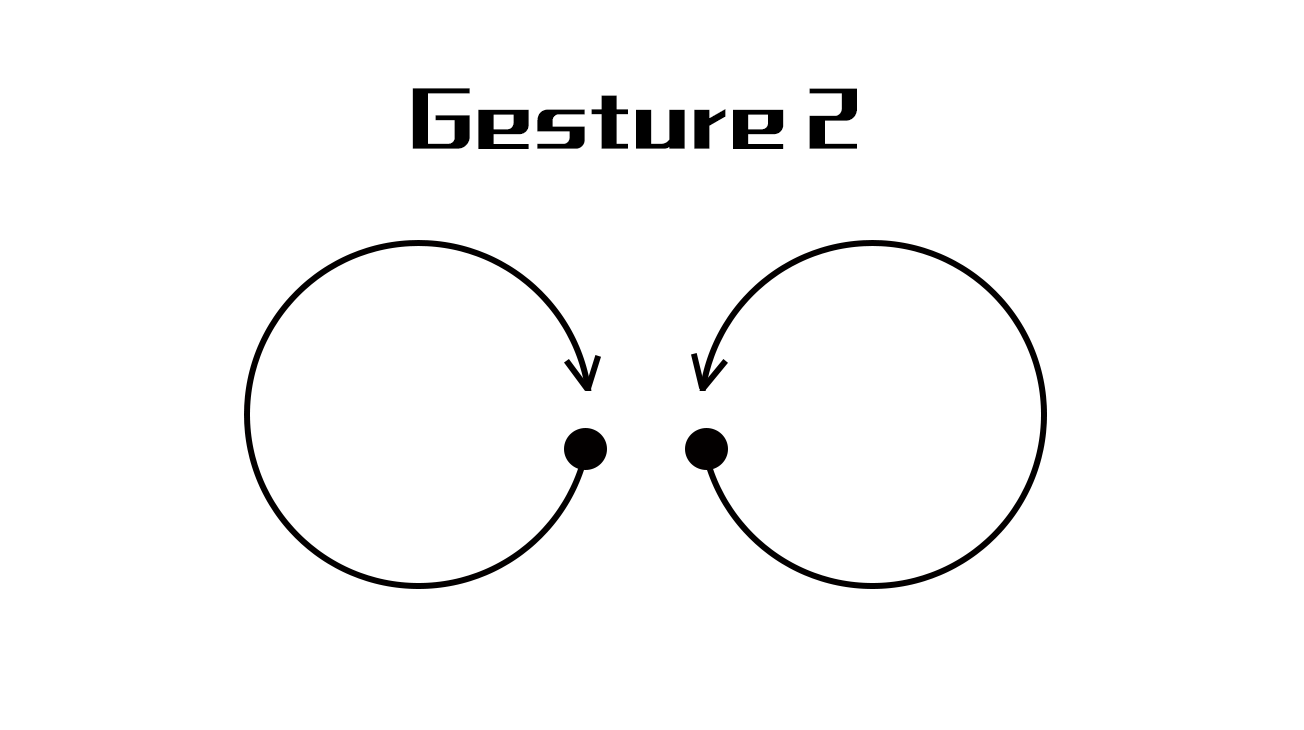
<style>
.page{position:relative;width:1304px;height:730px;background:#ffffff}
.page>*{position:absolute;margin:0}
.t1{font:66px "MFLiHei_Noncommercial-Regular";letter-spacing:0.05em;color:#000000}
</style>
<div class="page">
<p class="t1" style="left:412px;top:88px;width:445px;height:61px">Gesture 2</p>
</div>
